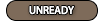
<style>
.page{position:relative;width:103px;height:21px;background:#7e6b5a}
.page>*{position:absolute;margin:0}
.t1{font:10px "AdobeHeitiStd-Regular";color:#ffffff}
</style>
<div class="page">
<p class="t1" style="left:29px;top:6px;width:45px;height:9px">UNREADY</p>
</div>
